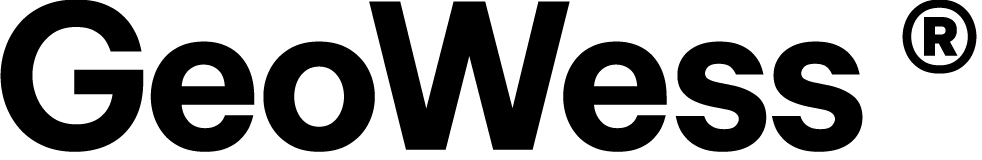
<style>
.page{position:relative;width:982px;height:160px;background:#ffffff}
.page>*{position:absolute;margin:0}
.t1{font:200px "BeVietnamPro-Bold";letter-spacing:-0.05em;color:#000000}
</style>
<div class="page">
<p class="t1" style="left:0px;top:0px;width:977px;height:152px">GeoWess ®</p>
</div>
